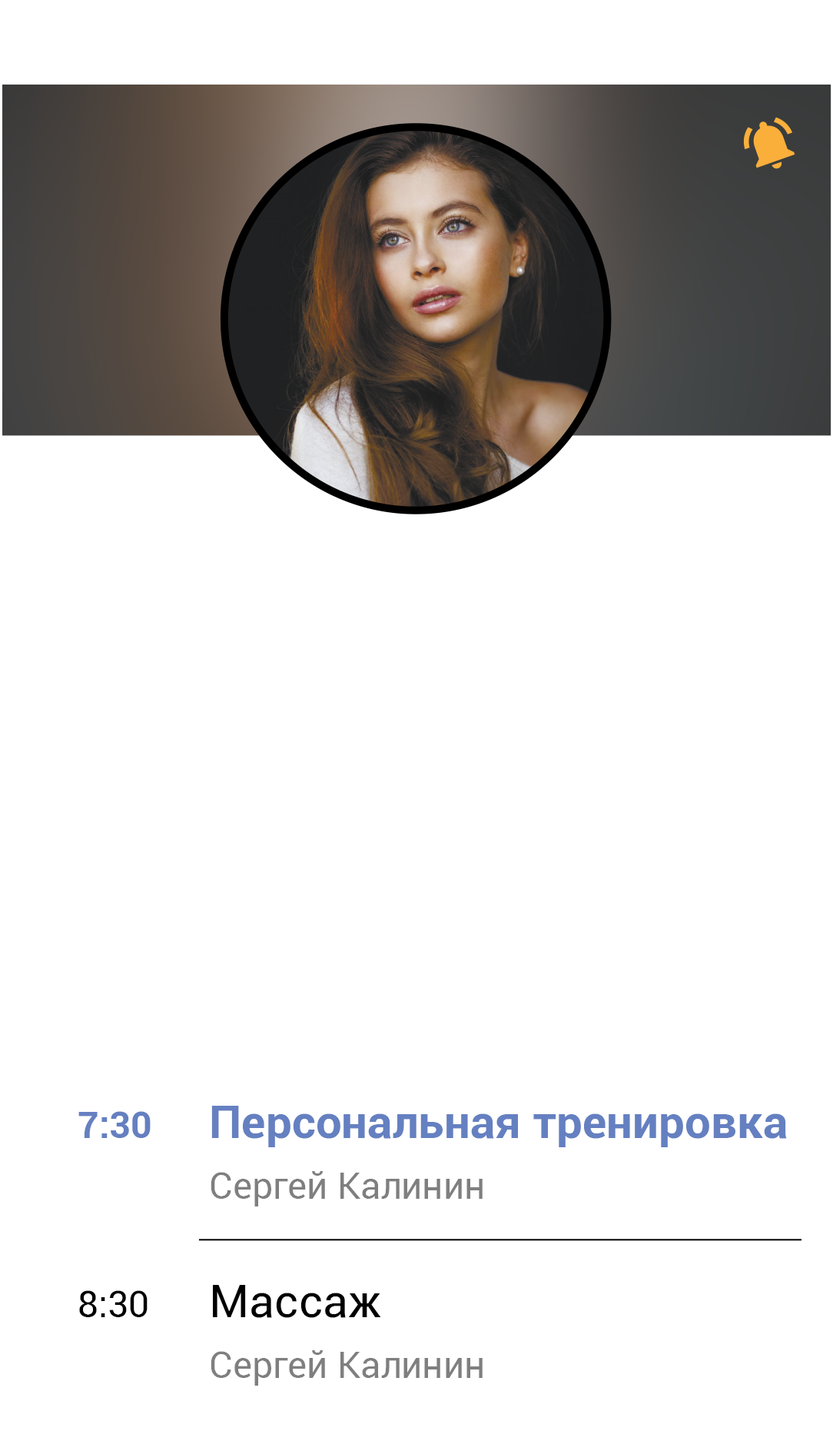
<style>
.page{position:relative;width:833px;height:1431px;background:#ffffff}
.page>*{position:absolute;margin:0}
.t1{font:46.1px "Roboto-Bold";color:#6580c1}
.t2{font:36.9px "Roboto-Bold";color:#6580c1}
.t3{font:36.9px "Roboto-Regular";color:#7f7f7f}
.t4{font:46.1px "Roboto-Regular";color:#000000}
.t5{font:36.9px "Roboto-Regular";color:#000000}
</style>
<div class="page">
<p class="t1" style="left:211px;top:1106px;width:576px;height:41px">Персональная тренировка</p>
<p class="t2" style="left:78px;top:1111px;width:73px;height:27px">7:30</p>
<p class="t3" style="left:211px;top:1171px;width:272px;height:35px">Сергей Калинин</p>
<p class="t4" style="left:213px;top:1285px;width:168px;height:33px">Массаж</p>
<p class="t5" style="left:79px;top:1290px;width:69px;height:27px">8:30</p>
<p class="t3" style="left:211px;top:1350px;width:272px;height:35px">Сергей Калинин</p>
</div>
